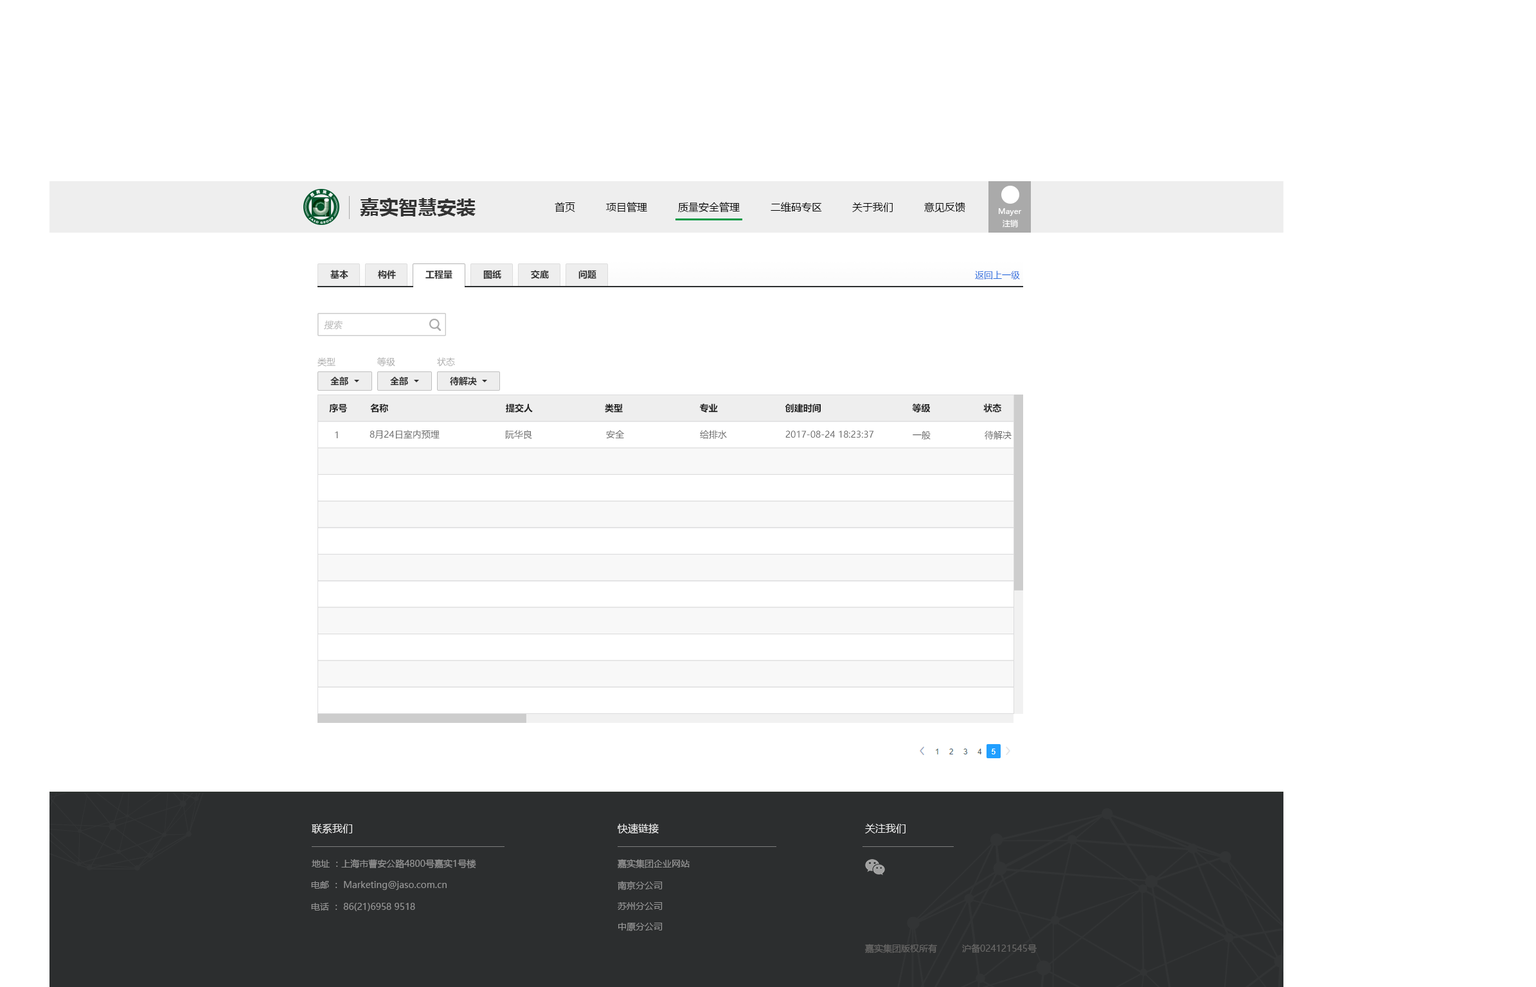
<style>
.page{position:relative;width:1536px;height:987px;background:#ffffff}
.page>*{position:absolute;margin:0}
.t1{font:19.3px "MicrosoftYaHei-Bold";color:#333333}
.t2{font:10.3px "MicrosoftYaHei";color:#000000}
.t3{font:7.7px "MicrosoftYaHei";color:#ffffff}
.t4{font:7.7px "MicrosoftYaHei";color:#fefefe}
.t5{font:9px "MicrosoftYaHei-Bold";color:#333333}
.t6{font:9px "MicrosoftYaHei";color:#2f70de}
.t7{font:9px "MicrosoftYaHei";color:#b5b5b5;font-style:italic}
.t8{font:9px "MicrosoftYaHei";color:#aaaaaa}
.t9{font:9px "MicrosoftYaHei-Bold";color:#1f1f1f}
.t10{font:9px "MicrosoftYaHei";color:#666666}
.t11{font:10.3px "MicrosoftYaHei";color:#eeeeee}
.t12{font:9px "MicrosoftYaHei";color:#969696}
.t13{font:9px "MicrosoftYaHei";color:#686766}
</style>
<div class="page">
<p class="t1" style="left:360px;top:198px;width:116px;height:19px">嘉实智慧安装</p>
<p class="t2" style="left:555px;top:202px;width:20px;height:11px">首页</p>
<p class="t2" style="left:606px;top:202px;width:41px;height:11px">项目管理</p>
<p class="t2" style="left:678px;top:202px;width:62px;height:11px">质量安全管理</p>
<p class="t2" style="left:771px;top:202px;width:51px;height:10px">二维码专区</p>
<p class="t2" style="left:852px;top:203px;width:41px;height:9px">关于我们</p>
<p class="t2" style="left:924px;top:202px;width:42px;height:10px">意见反馈</p>
<p class="t3" style="left:999px;top:208px;width:23px;height:8px">Mayer</p>
<p class="t4" style="left:1003px;top:219px;width:15px;height:9px">注销</p>
<p class="t5" style="left:330px;top:270px;width:18px;height:9px">基本</p>
<p class="t5" style="left:378px;top:270px;width:18px;height:9px">构件</p>
<p class="t5" style="left:426px;top:270px;width:27px;height:9px">工程量</p>
<p class="t5" style="left:483px;top:270px;width:18px;height:9px">图纸</p>
<p class="t5" style="left:531px;top:270px;width:18px;height:9px">交底</p>
<p class="t5" style="left:579px;top:270px;width:18px;height:9px">问题</p>
<p class="t6" style="left:975px;top:271px;width:45px;height:9px">返回上一级</p>
<p class="t7" style="left:324px;top:320px;width:19px;height:10px">搜索</p>
<p class="t8" style="left:318px;top:357px;width:18px;height:9px">类型</p>
<p class="t8" style="left:377px;top:357px;width:18px;height:9px">等级</p>
<p class="t8" style="left:437px;top:357px;width:18px;height:9px">状态</p>
<p class="t5" style="left:330px;top:377px;width:18px;height:9px">全部</p>
<p class="t5" style="left:390px;top:377px;width:18px;height:9px">全部</p>
<p class="t5" style="left:450px;top:377px;width:27px;height:9px">待解决</p>
<p class="t9" style="left:329px;top:404px;width:18px;height:9px">序号</p>
<p class="t9" style="left:370px;top:404px;width:18px;height:9px">名称</p>
<p class="t9" style="left:506px;top:404px;width:27px;height:9px">提交人</p>
<p class="t9" style="left:605px;top:404px;width:18px;height:9px">类型</p>
<p class="t9" style="left:700px;top:404px;width:18px;height:9px">专业</p>
<p class="t9" style="left:785px;top:404px;width:36px;height:9px">创建时间</p>
<p class="t9" style="left:912px;top:404px;width:19px;height:9px">等级</p>
<p class="t9" style="left:984px;top:404px;width:18px;height:9px">状态</p>
<p class="t10" style="left:335px;top:431px;width:3px;height:7px">1</p>
<p class="t10" style="left:370px;top:430px;width:70px;height:9px">8月24日室内预埋</p>
<p class="t10" style="left:506px;top:430px;width:26px;height:9px">阮华良</p>
<p class="t10" style="left:606px;top:430px;width:18px;height:9px">安全</p>
<p class="t10" style="left:700px;top:430px;width:27px;height:9px">给排水</p>
<p class="t10" style="left:786px;top:431px;width:88px;height:7px">2017-08-24 18:23:37</p>
<p class="t10" style="left:913px;top:431px;width:18px;height:9px">一般</p>
<p class="t10" style="left:985px;top:431px;width:27px;height:9px">待解决</p>
<p class="t11" style="left:312px;top:824px;width:40px;height:10px">联系我们</p>
<p class="t11" style="left:618px;top:824px;width:41px;height:10px">快速链接</p>
<p class="t11" style="left:865px;top:824px;width:41px;height:10px">关注我们</p>
<p class="t12" style="left:312px;top:860px;width:164px;height:9px">地址 ：上海市曹安公路4800号嘉实1号楼</p>
<p class="t12" style="left:618px;top:860px;width:72px;height:9px">嘉实集团企业网站</p>
<p class="t12" style="left:311px;top:881px;width:136px;height:9px">电邮 ： Marketing@jaso.com.cn</p>
<p class="t12" style="left:618px;top:881px;width:45px;height:9px">南京分公司</p>
<p class="t12" style="left:311px;top:903px;width:104px;height:9px">电话 ： 86(21)6958 9518</p>
<p class="t12" style="left:618px;top:903px;width:45px;height:7px">苏州分公司</p>
<p class="t12" style="left:618px;top:923px;width:45px;height:9px">中原分公司</p>
<p class="t13" style="left:865px;top:944px;width:72px;height:10px">嘉实集团版权所有</p>
<p class="t13" style="left:962px;top:944px;width:75px;height:9px">沪备024121545号</p>
</div>
